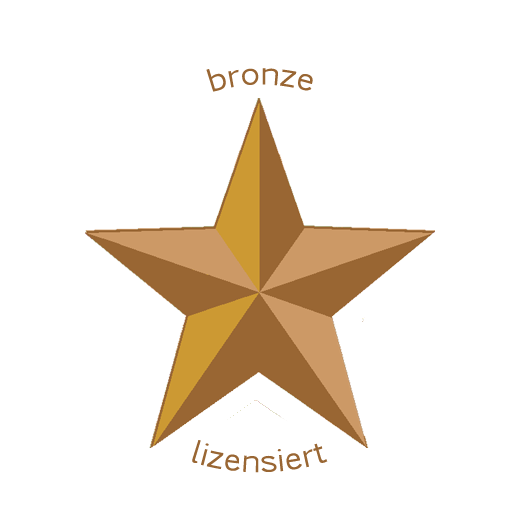
<style>
.page{position:relative;width:513px;height:510px;background:#ffffff}
.page>*{position:absolute;margin:0}
.t1{font:30px "EuphemiaCAS";color:#996633}
</style>
<div class="page">
<p class="t1" style="left:206px;top:68px;width:107px;height:24px">bronze</p>
<p class="t1" style="left:192px;top:440px;width:136px;height:33px">lizensiert</p>
</div>
